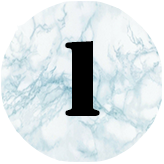
<style>
.page{position:relative;width:164px;height:164px;background:#ffffff}
.page>*{position:absolute;margin:0}
.t1{font:100px "StencilStd";color:#000000}
</style>
<div class="page">
<p class="t1" style="left:65px;top:41px;width:35px;height:75px">1</p>
</div>
